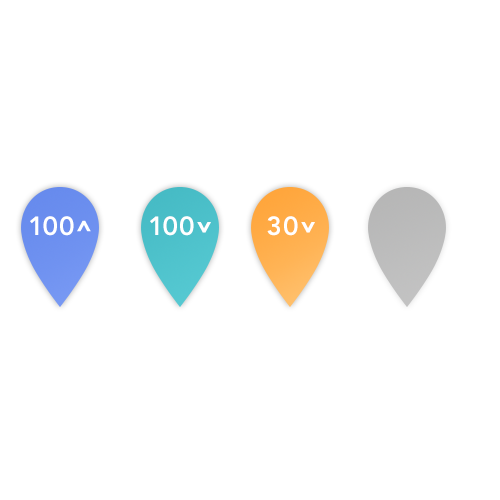
<style>
.page{position:relative;width:500px;height:500px;background:#ffffff}
.page>*{position:absolute;margin:0}
.t1{font:26px "Avenir-Heavy";letter-spacing:-0.05em;color:#ffffff;text-transform:uppercase}
.t2{font:26px "Avenir-Heavy";letter-spacing:0.05em;color:#ffffff;text-transform:uppercase}
.t3{font:26px "Avenir-Heavy";color:#ffffff;text-transform:uppercase}
.t4{font:26px "AvenirNext-Bold";letter-spacing:-0.05em;color:#ffffff;text-transform:uppercase;scale:0.8 1}
</style>
<div class="page">
<p class="t1" style="left:30px;top:216px;width:44px;height:20px">1<span class="t2">0</span><span class="t3">0</span></p>
<p class="t1" style="left:150px;top:216px;width:44px;height:20px">1<span class="t2">0</span><span class="t3">0</span></p>
<p class="t4" style="left:197px;top:222px;width:14px;height:11px;rotate:90deg">&gt;</p>
<p class="t2" style="left:267px;top:216px;width:31px;height:20px">30</p>
<p class="t4" style="left:301px;top:222px;width:14px;height:11px;rotate:90deg">&gt;</p>
</div>
